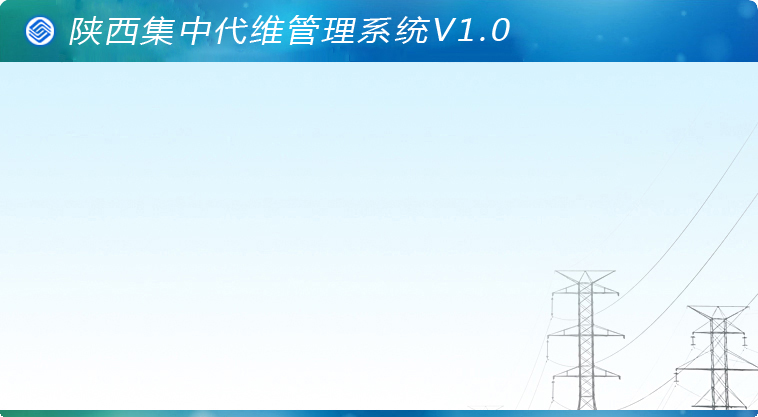
<style>
.page{position:relative;width:758px;height:417px}
.page>*{position:absolute;margin:0}
.t1{font:29.9px "MicrosoftYaHei";letter-spacing:0.1em;color:#ffffff;font-style:italic;scale:1.1 1}
</style>
<div class="page">
<p class="t1" style="left:69px;top:15px;width:441px;height:30px">陕西集中代维管理系统V1.0</p>
</div>
